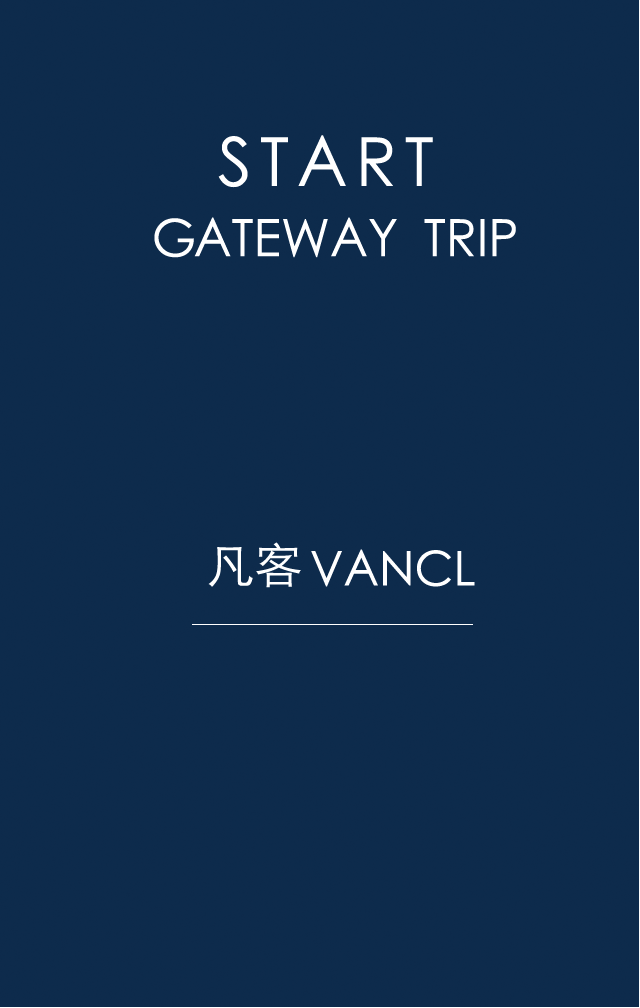
<style>
.page{position:relative;width:640px;height:1008px;background:#0d2b4c}
.page>*{position:absolute;margin:0}
.t1{font:67.4px "STXihei";letter-spacing:0.12em;color:#ffffff}
.t2{font:51.5px "STXihei";color:#ffffff}
.t3{font:48px "STXihei";color:#ffffff}
</style>
<div class="page">
<p class="t1" style="left:218px;top:135px;width:215px;height:53px">START</p>
<p class="t2" style="left:154px;top:217px;width:362px;height:41px">GATEWAY  TRIP</p>
<p class="t3" style="left:208px;top:542px;width:93px;height:46px">凡客</p>
<p class="t3" style="left:311px;top:549px;width:164px;height:38px">VANCL</p>
</div>
